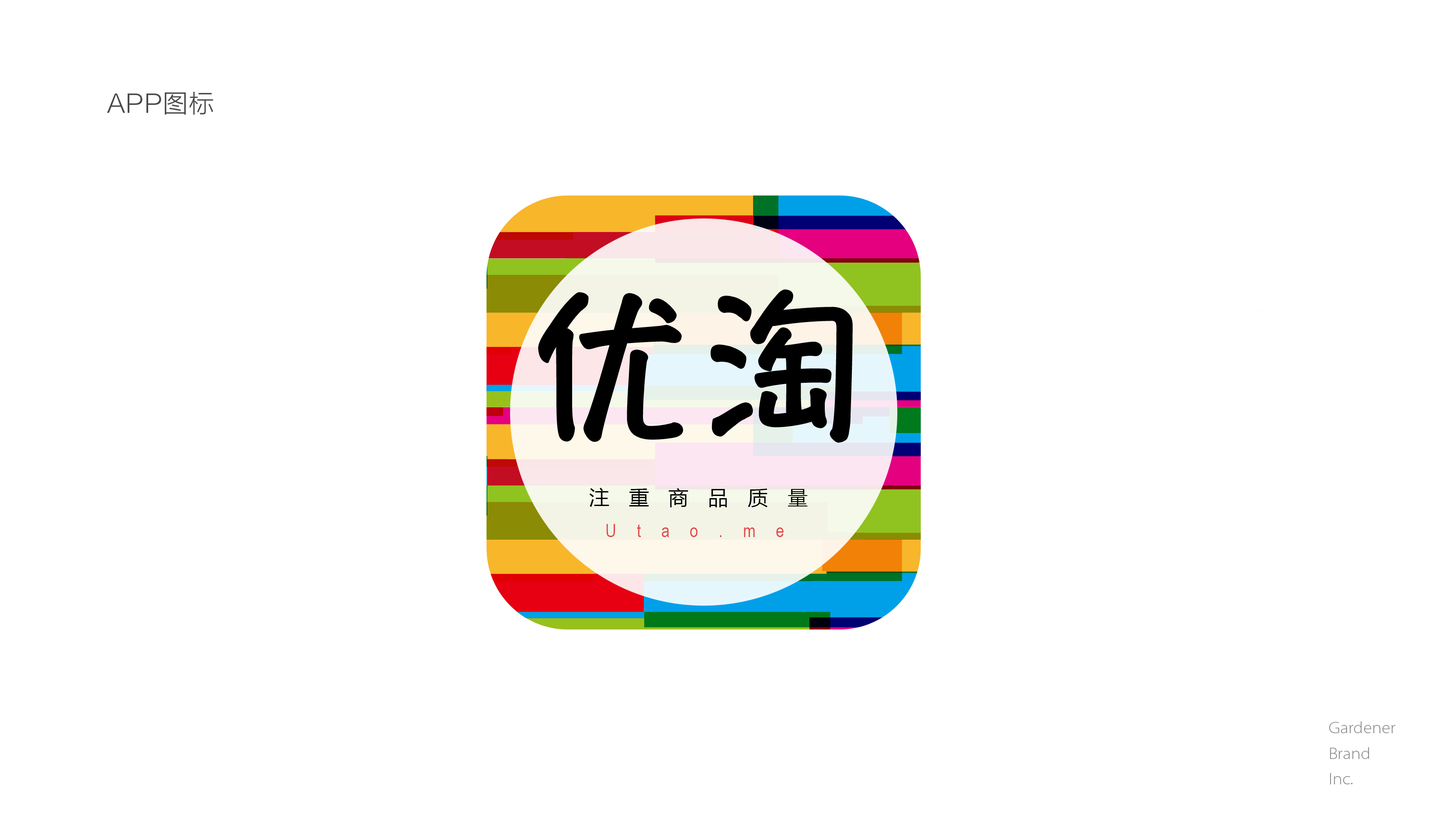
<style>
.page{position:relative;width:1445px;height:825px;background:#ffffff}
.page>*{position:absolute;margin:0}
.t1{font:160.3px "HannotateSC-W7";letter-spacing:0.075em;color:#000000}
.t2{font:20px "MicrosoftYaHei";letter-spacing:0.13em;color:#000000}
.t3{font:18.2px "ArialNarrow";letter-spacing:1.12em;color:#e04949}
</style>
<div class="page">
<p class="t1" style="left:539px;top:291px;width:312px;height:150px">优淘</p>
<p class="t2" style="left:589px;top:488px;width:219px;height:19px">注  重  商  品  质  量</p>
<p class="t3" style="left:606px;top:524px;width:178px;height:13px">Utao.me</p>
</div>
